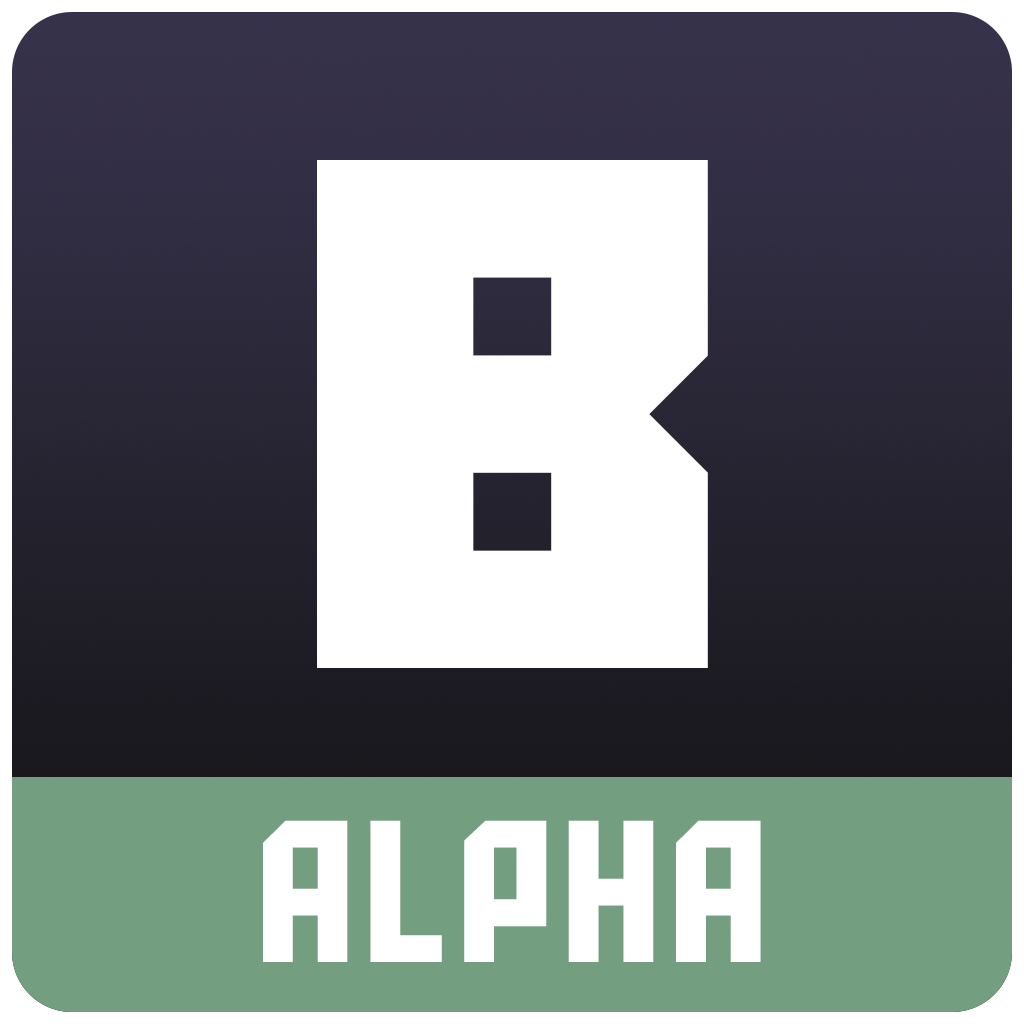
<style>
.page{position:relative;width:1024px;height:1024px;background:#ffffff}
.page>*{position:absolute;margin:0}
.t1{font:800px "RobotCrush";letter-spacing:0.05em;color:#ffffff}
.t2{font:200px "AldotheApache";letter-spacing:0.05em;color:#ffffff}
</style>
<div class="page">
<p class="t1" style="left:317px;top:160px;width:391px;height:508px">B</p>
<p class="t2" style="left:263px;top:820px;width:498px;height:142px">ALPHA</p>
</div>
